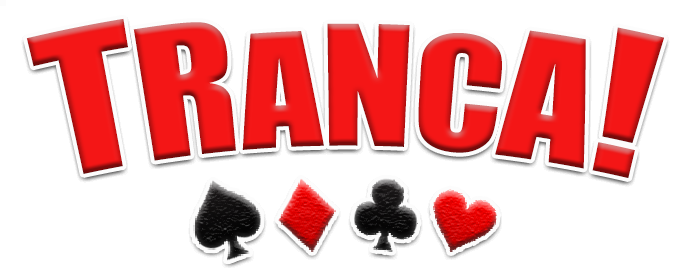
<style>
.page{position:relative;width:690px;height:279px;background:#ffffff}
.page>*{position:absolute;margin:0}
.t1{font:182.7px "Impact";color:#f41616}
.t2{font:168.1px "Impact";color:#f41616}
.t3{font:146.1px "Impact";color:#f41616}
.t4{font:153.5px "Impact";color:#f41616}
.t5{font:160.8px "Impact";color:#f41616}
</style>
<div class="page">
<p class="t1" style="left:26px;top:18px;width:638px;height:160px">T<span class="t2">R</span><span class="t3">A</span><span class="t4">N</span><span class="t3">C</span><span class="t5">A</span>!</p>
</div>
